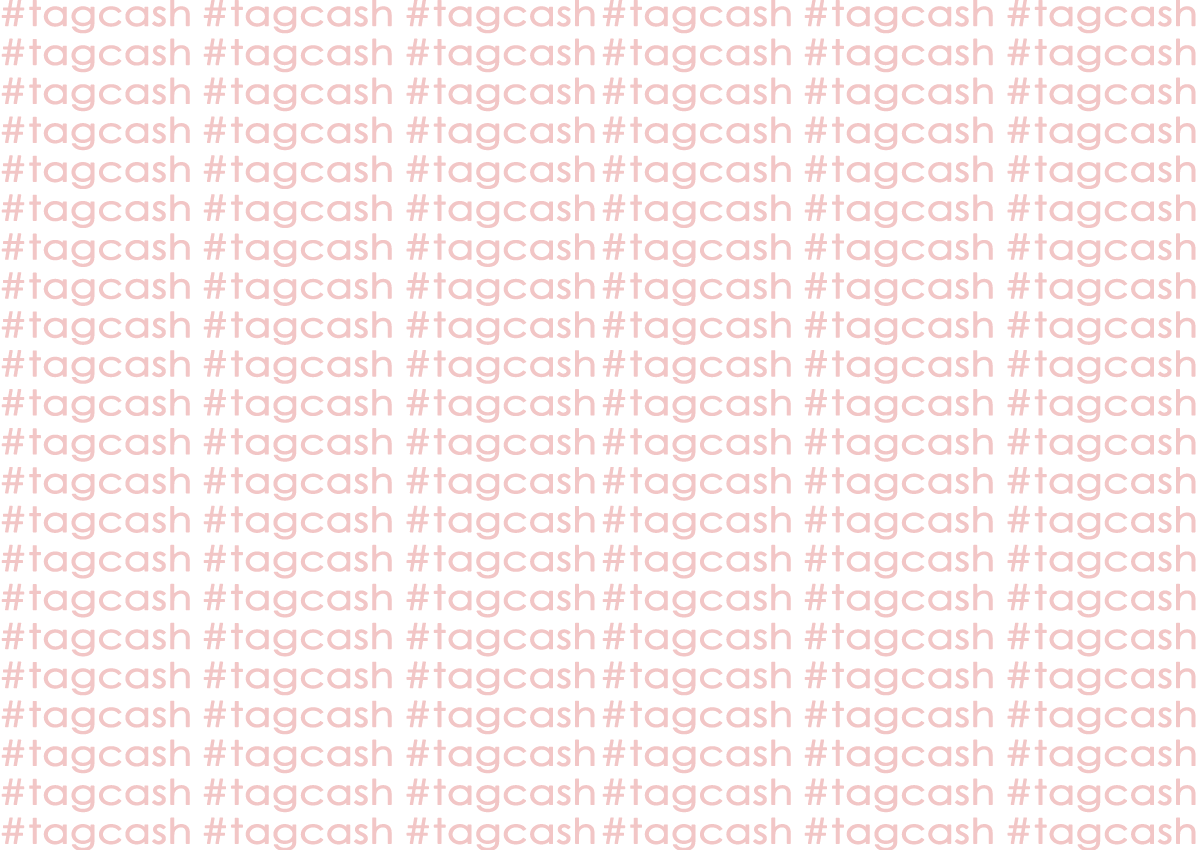
<style>
.page{position:relative;width:1200px;height:850px;background:#ffffff}
.page>*{position:absolute;margin:0}
.t1{font:34.4px "CenturyGothic";color:#f2c6c6;font-weight:bold;scale:1.14 1}
</style>
<div class="page">
<p class="t1" style="left:1px;top:0px;width:189px;height:34px">#tagcash</p>
<p class="t1" style="left:203px;top:0px;width:189px;height:34px">#tagcash</p>
<p class="t1" style="left:406px;top:0px;width:189px;height:34px">#tagcash</p>
<p class="t1" style="left:602px;top:0px;width:189px;height:34px">#tagcash</p>
<p class="t1" style="left:804px;top:0px;width:189px;height:34px">#tagcash</p>
<p class="t1" style="left:1007px;top:0px;width:189px;height:34px">#tagcash</p>
<p class="t1" style="left:1px;top:38px;width:189px;height:35px">#tagcash</p>
<p class="t1" style="left:203px;top:38px;width:189px;height:35px">#tagcash</p>
<p class="t1" style="left:406px;top:38px;width:189px;height:35px">#tagcash</p>
<p class="t1" style="left:602px;top:38px;width:189px;height:35px">#tagcash</p>
<p class="t1" style="left:804px;top:38px;width:189px;height:35px">#tagcash</p>
<p class="t1" style="left:1007px;top:38px;width:189px;height:35px">#tagcash</p>
<p class="t1" style="left:1px;top:77px;width:189px;height:35px">#tagcash</p>
<p class="t1" style="left:203px;top:77px;width:189px;height:35px">#tagcash</p>
<p class="t1" style="left:406px;top:77px;width:189px;height:35px">#tagcash</p>
<p class="t1" style="left:602px;top:77px;width:189px;height:35px">#tagcash</p>
<p class="t1" style="left:804px;top:77px;width:189px;height:35px">#tagcash</p>
<p class="t1" style="left:1007px;top:77px;width:189px;height:35px">#tagcash</p>
<p class="t1" style="left:1px;top:116px;width:189px;height:35px">#tagcash</p>
<p class="t1" style="left:203px;top:116px;width:189px;height:35px">#tagcash</p>
<p class="t1" style="left:406px;top:116px;width:189px;height:35px">#tagcash</p>
<p class="t1" style="left:602px;top:116px;width:189px;height:35px">#tagcash</p>
<p class="t1" style="left:804px;top:116px;width:189px;height:35px">#tagcash</p>
<p class="t1" style="left:1007px;top:116px;width:189px;height:35px">#tagcash</p>
<p class="t1" style="left:1px;top:155px;width:189px;height:34px">#tagcash</p>
<p class="t1" style="left:203px;top:155px;width:189px;height:34px">#tagcash</p>
<p class="t1" style="left:406px;top:155px;width:189px;height:34px">#tagcash</p>
<p class="t1" style="left:602px;top:155px;width:189px;height:34px">#tagcash</p>
<p class="t1" style="left:804px;top:155px;width:189px;height:34px">#tagcash</p>
<p class="t1" style="left:1007px;top:155px;width:189px;height:34px">#tagcash</p>
<p class="t1" style="left:1px;top:194px;width:189px;height:34px">#tagcash</p>
<p class="t1" style="left:203px;top:194px;width:189px;height:34px">#tagcash</p>
<p class="t1" style="left:406px;top:194px;width:189px;height:34px">#tagcash</p>
<p class="t1" style="left:602px;top:194px;width:189px;height:34px">#tagcash</p>
<p class="t1" style="left:804px;top:194px;width:189px;height:34px">#tagcash</p>
<p class="t1" style="left:1007px;top:194px;width:189px;height:34px">#tagcash</p>
<p class="t1" style="left:1px;top:233px;width:189px;height:34px">#tagcash</p>
<p class="t1" style="left:203px;top:233px;width:189px;height:34px">#tagcash</p>
<p class="t1" style="left:406px;top:233px;width:189px;height:34px">#tagcash</p>
<p class="t1" style="left:602px;top:233px;width:189px;height:34px">#tagcash</p>
<p class="t1" style="left:804px;top:233px;width:189px;height:34px">#tagcash</p>
<p class="t1" style="left:1007px;top:233px;width:189px;height:34px">#tagcash</p>
<p class="t1" style="left:1px;top:272px;width:189px;height:34px">#tagcash</p>
<p class="t1" style="left:203px;top:272px;width:189px;height:34px">#tagcash</p>
<p class="t1" style="left:406px;top:272px;width:189px;height:34px">#tagcash</p>
<p class="t1" style="left:602px;top:272px;width:189px;height:34px">#tagcash</p>
<p class="t1" style="left:804px;top:272px;width:189px;height:34px">#tagcash</p>
<p class="t1" style="left:1007px;top:272px;width:189px;height:34px">#tagcash</p>
<p class="t1" style="left:1px;top:311px;width:189px;height:34px">#tagcash</p>
<p class="t1" style="left:203px;top:311px;width:189px;height:34px">#tagcash</p>
<p class="t1" style="left:406px;top:311px;width:189px;height:34px">#tagcash</p>
<p class="t1" style="left:602px;top:311px;width:189px;height:34px">#tagcash</p>
<p class="t1" style="left:804px;top:311px;width:189px;height:34px">#tagcash</p>
<p class="t1" style="left:1007px;top:311px;width:189px;height:34px">#tagcash</p>
<p class="t1" style="left:1px;top:350px;width:189px;height:34px">#tagcash</p>
<p class="t1" style="left:203px;top:350px;width:189px;height:34px">#tagcash</p>
<p class="t1" style="left:406px;top:350px;width:189px;height:34px">#tagcash</p>
<p class="t1" style="left:602px;top:350px;width:189px;height:34px">#tagcash</p>
<p class="t1" style="left:804px;top:350px;width:189px;height:34px">#tagcash</p>
<p class="t1" style="left:1007px;top:350px;width:189px;height:34px">#tagcash</p>
<p class="t1" style="left:1px;top:389px;width:189px;height:34px">#tagcash</p>
<p class="t1" style="left:203px;top:389px;width:189px;height:34px">#tagcash</p>
<p class="t1" style="left:406px;top:389px;width:189px;height:34px">#tagcash</p>
<p class="t1" style="left:602px;top:389px;width:189px;height:34px">#tagcash</p>
<p class="t1" style="left:804px;top:389px;width:189px;height:34px">#tagcash</p>
<p class="t1" style="left:1007px;top:389px;width:189px;height:34px">#tagcash</p>
<p class="t1" style="left:1px;top:428px;width:189px;height:34px">#tagcash</p>
<p class="t1" style="left:203px;top:428px;width:189px;height:34px">#tagcash</p>
<p class="t1" style="left:406px;top:428px;width:189px;height:34px">#tagcash</p>
<p class="t1" style="left:602px;top:428px;width:189px;height:34px">#tagcash</p>
<p class="t1" style="left:804px;top:428px;width:189px;height:34px">#tagcash</p>
<p class="t1" style="left:1007px;top:428px;width:189px;height:34px">#tagcash</p>
<p class="t1" style="left:1px;top:467px;width:189px;height:34px">#tagcash</p>
<p class="t1" style="left:203px;top:467px;width:189px;height:34px">#tagcash</p>
<p class="t1" style="left:406px;top:467px;width:189px;height:34px">#tagcash</p>
<p class="t1" style="left:602px;top:467px;width:189px;height:34px">#tagcash</p>
<p class="t1" style="left:804px;top:467px;width:189px;height:34px">#tagcash</p>
<p class="t1" style="left:1007px;top:467px;width:189px;height:34px">#tagcash</p>
<p class="t1" style="left:1px;top:505px;width:189px;height:35px">#tagcash</p>
<p class="t1" style="left:203px;top:505px;width:189px;height:35px">#tagcash</p>
<p class="t1" style="left:406px;top:505px;width:189px;height:35px">#tagcash</p>
<p class="t1" style="left:602px;top:505px;width:189px;height:35px">#tagcash</p>
<p class="t1" style="left:804px;top:505px;width:189px;height:35px">#tagcash</p>
<p class="t1" style="left:1007px;top:505px;width:189px;height:35px">#tagcash</p>
<p class="t1" style="left:1px;top:544px;width:189px;height:35px">#tagcash</p>
<p class="t1" style="left:203px;top:544px;width:189px;height:35px">#tagcash</p>
<p class="t1" style="left:406px;top:544px;width:189px;height:35px">#tagcash</p>
<p class="t1" style="left:602px;top:544px;width:189px;height:35px">#tagcash</p>
<p class="t1" style="left:804px;top:544px;width:189px;height:35px">#tagcash</p>
<p class="t1" style="left:1007px;top:544px;width:189px;height:35px">#tagcash</p>
<p class="t1" style="left:1px;top:583px;width:189px;height:35px">#tagcash</p>
<p class="t1" style="left:203px;top:583px;width:189px;height:35px">#tagcash</p>
<p class="t1" style="left:406px;top:583px;width:189px;height:35px">#tagcash</p>
<p class="t1" style="left:602px;top:583px;width:189px;height:35px">#tagcash</p>
<p class="t1" style="left:804px;top:583px;width:189px;height:35px">#tagcash</p>
<p class="t1" style="left:1007px;top:583px;width:189px;height:35px">#tagcash</p>
<p class="t1" style="left:1px;top:622px;width:189px;height:35px">#tagcash</p>
<p class="t1" style="left:203px;top:622px;width:189px;height:35px">#tagcash</p>
<p class="t1" style="left:406px;top:622px;width:189px;height:35px">#tagcash</p>
<p class="t1" style="left:602px;top:622px;width:189px;height:35px">#tagcash</p>
<p class="t1" style="left:804px;top:622px;width:189px;height:35px">#tagcash</p>
<p class="t1" style="left:1007px;top:622px;width:189px;height:35px">#tagcash</p>
<p class="t1" style="left:1px;top:661px;width:189px;height:35px">#tagcash</p>
<p class="t1" style="left:203px;top:661px;width:189px;height:35px">#tagcash</p>
<p class="t1" style="left:406px;top:661px;width:189px;height:35px">#tagcash</p>
<p class="t1" style="left:602px;top:661px;width:189px;height:35px">#tagcash</p>
<p class="t1" style="left:804px;top:661px;width:189px;height:35px">#tagcash</p>
<p class="t1" style="left:1007px;top:661px;width:189px;height:35px">#tagcash</p>
<p class="t1" style="left:1px;top:700px;width:189px;height:35px">#tagcash</p>
<p class="t1" style="left:203px;top:700px;width:189px;height:35px">#tagcash</p>
<p class="t1" style="left:406px;top:700px;width:189px;height:35px">#tagcash</p>
<p class="t1" style="left:602px;top:700px;width:189px;height:35px">#tagcash</p>
<p class="t1" style="left:804px;top:700px;width:189px;height:35px">#tagcash</p>
<p class="t1" style="left:1007px;top:700px;width:189px;height:35px">#tagcash</p>
<p class="t1" style="left:1px;top:739px;width:189px;height:35px">#tagcash</p>
<p class="t1" style="left:203px;top:739px;width:189px;height:35px">#tagcash</p>
<p class="t1" style="left:406px;top:739px;width:189px;height:35px">#tagcash</p>
<p class="t1" style="left:602px;top:739px;width:189px;height:35px">#tagcash</p>
<p class="t1" style="left:804px;top:739px;width:189px;height:35px">#tagcash</p>
<p class="t1" style="left:1007px;top:739px;width:189px;height:35px">#tagcash</p>
<p class="t1" style="left:1px;top:778px;width:189px;height:35px">#tagcash</p>
<p class="t1" style="left:203px;top:778px;width:189px;height:35px">#tagcash</p>
<p class="t1" style="left:406px;top:778px;width:189px;height:35px">#tagcash</p>
<p class="t1" style="left:602px;top:778px;width:189px;height:35px">#tagcash</p>
<p class="t1" style="left:804px;top:778px;width:189px;height:35px">#tagcash</p>
<p class="t1" style="left:1007px;top:778px;width:189px;height:35px">#tagcash</p>
<p class="t1" style="left:1px;top:817px;width:189px;height:35px">#tagcash</p>
<p class="t1" style="left:203px;top:817px;width:189px;height:35px">#tagcash</p>
<p class="t1" style="left:406px;top:817px;width:189px;height:35px">#tagcash</p>
<p class="t1" style="left:602px;top:817px;width:189px;height:35px">#tagcash</p>
<p class="t1" style="left:804px;top:817px;width:189px;height:35px">#tagcash</p>
<p class="t1" style="left:1007px;top:817px;width:189px;height:35px">#tagcash</p>
</div>
